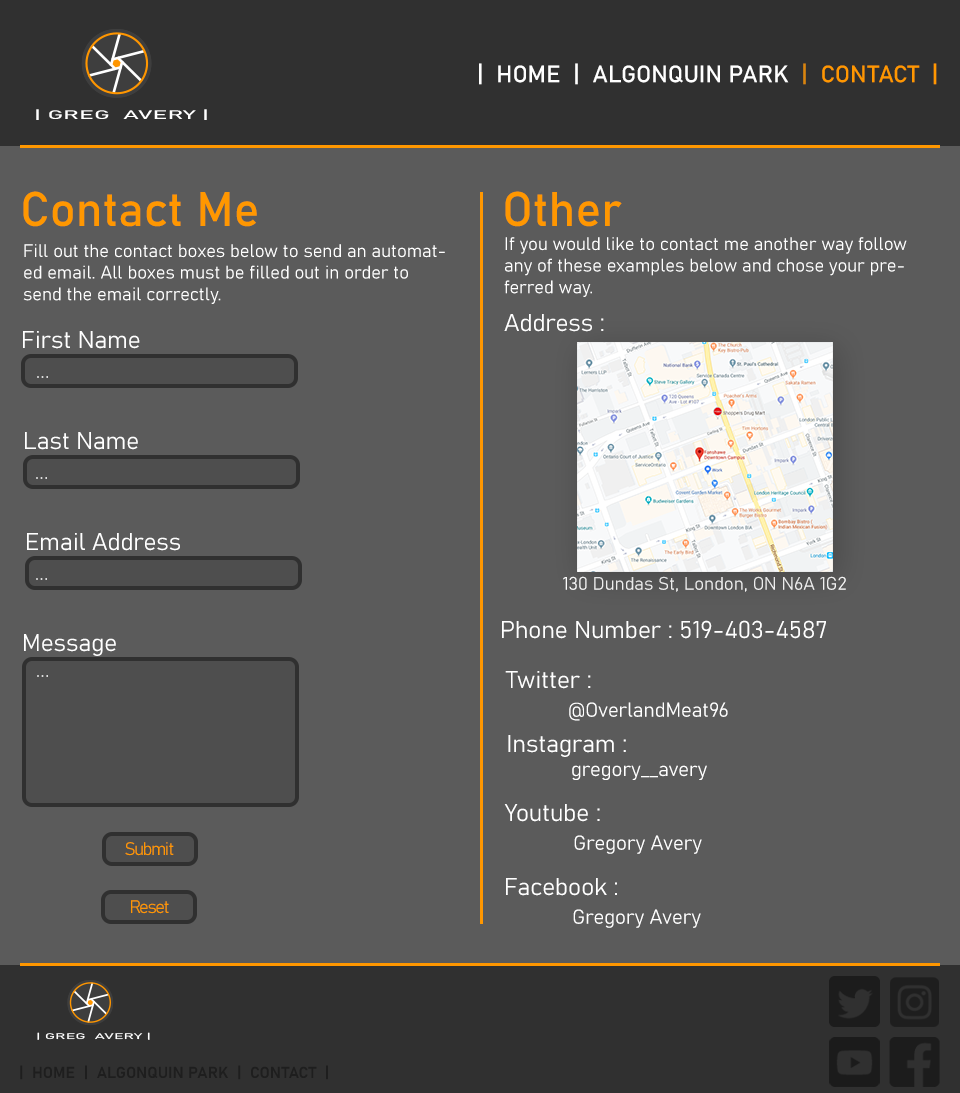
<style>
.page{position:relative;width:960px;height:1093px;background:#5b5b5b}
.page>*{position:absolute;margin:0}
.t1{font:23.5px "Bahnschrift";color:#ffffff;font-style:italic}
.t2{font:23.5px "Bahnschrift";color:#d9850c;font-style:italic}
.t3{font:23.5px "Bahnschrift";color:#ff9700;font-style:italic}
.t4{font:48px "Bahnschrift";color:#ff9700;font-style:italic}
.t5{font:18px "Bahnschrift";color:#ffffff;font-style:italic}
.t6{font:24px "Bahnschrift";color:#ffffff;font-style:italic}
.t7{font:20px "Bahnschrift";font-style:italic}
.t8{font:20px "Bahnschrift";color:#ffffff;font-style:italic}
.t9{font:18px "Bahnschrift-BoldSemiCondensed";color:#ff9700;font-style:italic}
.t10{font:15.8px "Bahnschrift_618wght";color:#1e1e1e;font-style:italic}
</style>
<div class="page">
<p class="t1" style="left:479px;top:63px;width:458px;height:22px">|  HOME  |  ALGONQUIN PARK  <span class="t2">|  </span><span class="t3">CONTACT  |</span></p>
<p class="t4" style="left:23px;top:191px;width:234px;height:36px">Contact Me</p>
<p class="t4" style="left:505px;top:191px;width:117px;height:36px">Other</p>
<p class="t5" style="left:23px;top:244px;width:422px;height:60px">Fill out the contact boxes below to send an automated email. All boxes must be filled out in order to send the email correctly.</p>
<p class="t5" style="left:504px;top:237px;width:403px;height:60px">If you would like to contact me another way follow any of these examples below and chose your preferred way.</p>
<p class="t6" style="left:504px;top:314px;width:100px;height:18px">Address :</p>
<p class="t6" style="left:23px;top:331px;width:117px;height:18px">First Name</p>
<p class="t7" style="left:37px;top:376px;width:11px;height:2px">...</p>
<p class="t6" style="left:25px;top:432px;width:113px;height:18px">Last Name</p>
<p class="t7" style="left:36px;top:477px;width:11px;height:2px">...</p>
<p class="t6" style="left:27px;top:533px;width:153px;height:18px">Email Address</p>
<p class="t7" style="left:36px;top:578px;width:11px;height:2px">...</p>
<p class="t5" style="left:563px;top:576px;width:283px;height:16px">130 Dundas St, London, ON N6A 1G2</p>
<p class="t6" style="left:502px;top:620px;width:324px;height:19px">Phone Number : 519-403-4587</p>
<p class="t6" style="left:24px;top:634px;width:92px;height:22px">Message</p>
<p class="t7" style="left:37px;top:675px;width:11px;height:2px">...</p>
<p class="t8" style="left:505px;top:671px;width:223px;height:50px"><span class="t6">Twitter :   <br>     </span>@OverlandMeat96</p>
<p class="t8" style="left:508px;top:735px;width:199px;height:45px"><span class="t6">Instagram : <br>       </span>gregory__avery</p>
<p class="t8" style="left:504px;top:804px;width:198px;height:50px"><span class="t6">Youtube : <br>      </span>Gregory Avery</p>
<p class="t9" style="left:125px;top:842px;width:49px;height:14px">Submit</p>
<p class="t8" style="left:506px;top:878px;width:195px;height:50px"><span class="t6">Facebook :<br>      </span>Gregory Avery</p>
<p class="t9" style="left:131px;top:900px;width:38px;height:14px">Reset</p>
<p class="t10" style="left:20px;top:1065px;width:308px;height:15px">|  HOME  |  ALGONQUIN PARK  |  CONTACT  |</p>
</div>
